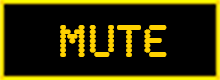
<style>
.page{position:relative;width:220px;height:80px;background:#000000}
.page>*{position:absolute;margin:0}
.t1{font:48px "SynchroLET";letter-spacing:-0.01em;color:#ffd200}
</style>
<div class="page">
<p class="t1" style="left:60px;top:25px;width:107px;height:32px">Mute</p>
</div>
